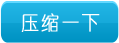
<style>
.page{position:relative;width:119px;height:43px}
.page>*{position:absolute;margin:0}
.t1{font:20px "YouYuan";letter-spacing:0.1em;color:#ffffff;font-weight:bold;scale:0.89 1}
</style>
<div class="page">
<p class="t1" style="left:21px;top:13px;width:79px;height:19px">压缩一下</p>
</div>
